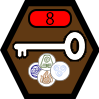
<style>
.page{position:relative;width:99px;height:99px;background:#ffffff}
.page>*{position:absolute;margin:0}
.t1{font:16.7px "KozGoPr6N-Regular";color:#000000}
</style>
<div class="page">
<p class="t1" style="left:46px;top:12px;width:8px;height:13px">8</p>
</div>
